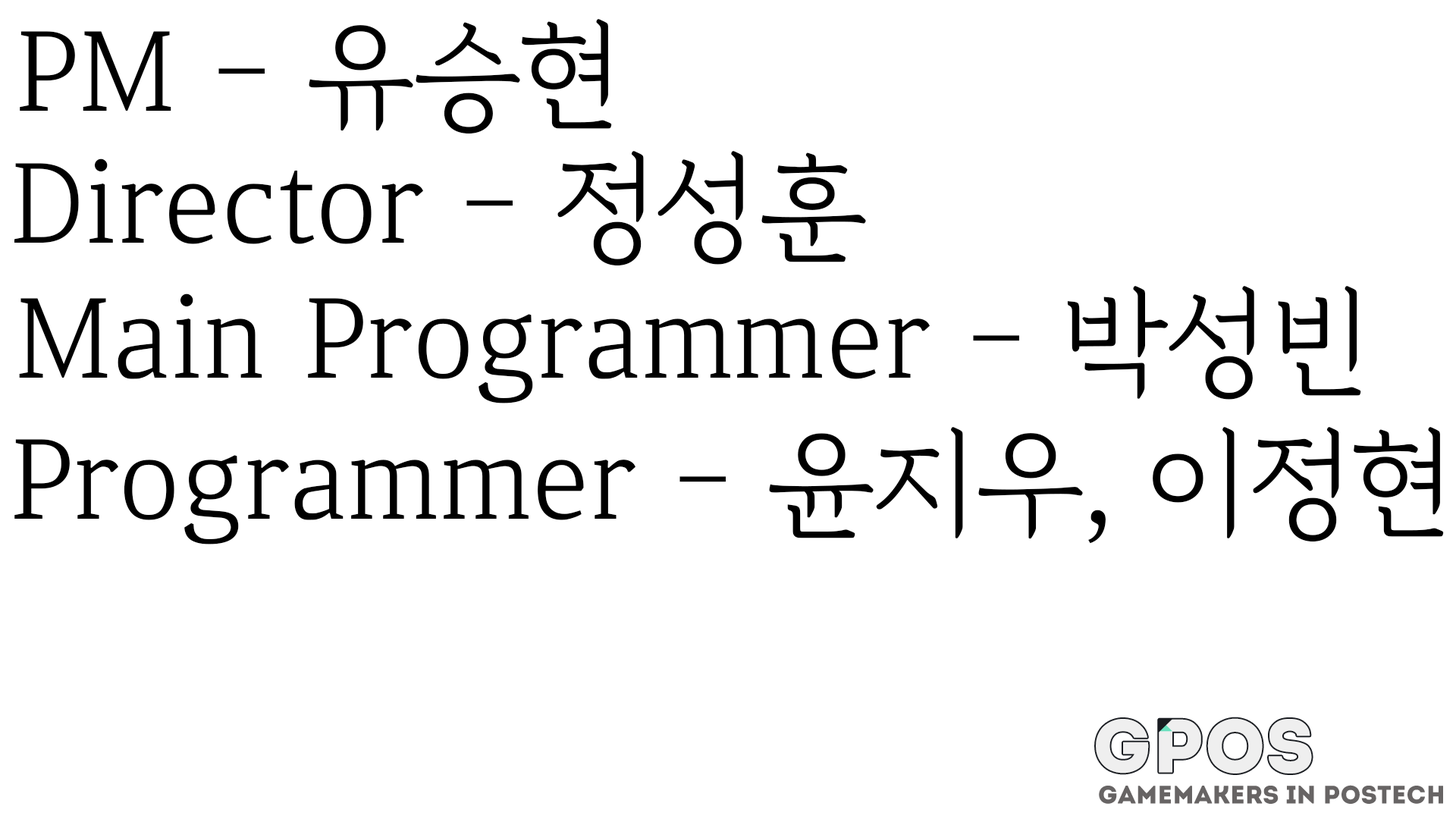
<style>
.page{position:relative;width:1456px;height:819px;background:#ffffff}
.page>*{position:absolute;margin:0}
.t1{font:117.5px "GyeonggiBatangR";color:#000000}
</style>
<div class="page">
<p class="t1" style="left:20px;top:19px;width:592px;height:115px">PM - 유승현</p>
<p class="t1" style="left:14px;top:151px;width:852px;height:115px">Director - 정성훈</p>
<p class="t1" style="left:19px;top:286px;width:1342px;height:117px">Main Programmer - 박성빈</p>
<p class="t1" style="left:14px;top:427px;width:1430px;height:117px">Programmer - 윤지우, 이정현</p>
</div>
